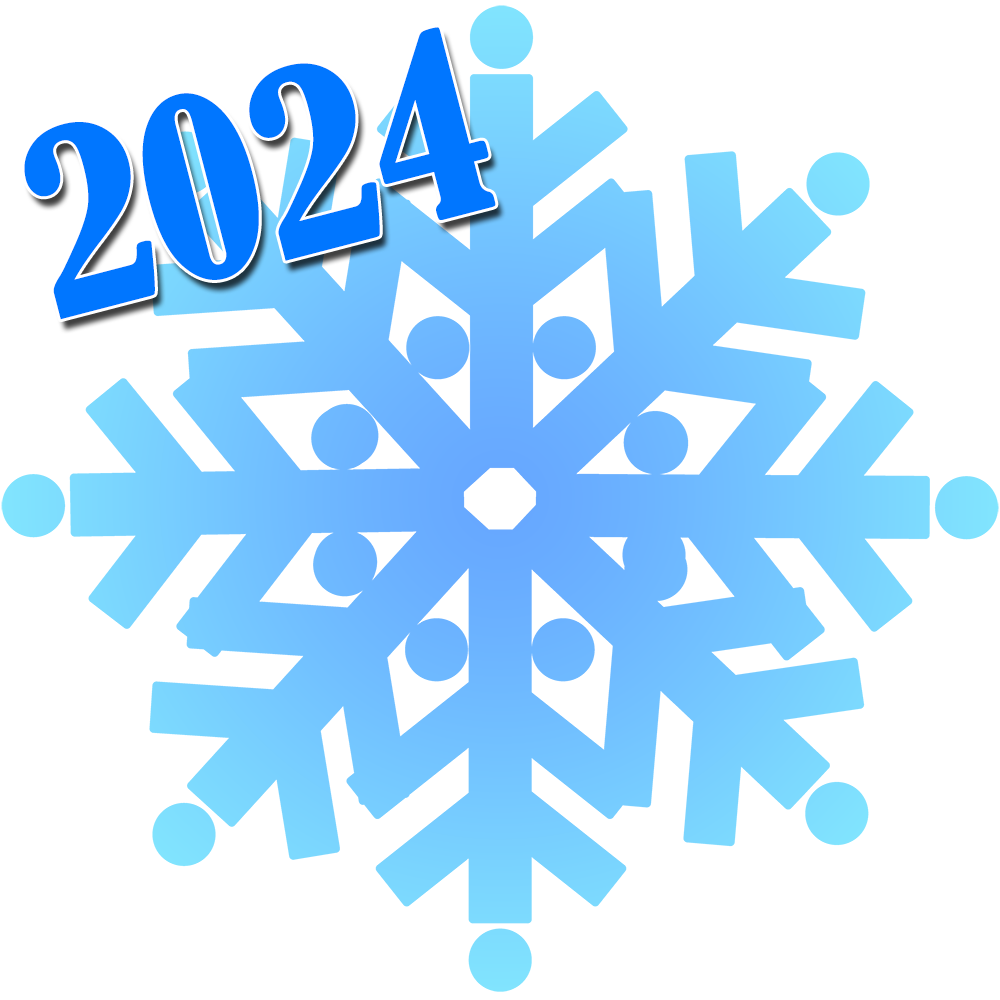
<style>
.page{position:relative;width:1000px;height:1000px;background:#ffffff}
.page>*{position:absolute;margin:0}
.t1{font:237.2px "BernardMT-Condensed";color:#0076ff}
</style>
<div class="page">
<p class="t1" style="left:24px;top:27px;width:472px;height:293px;rotate:-15deg">2024</p>
</div>
